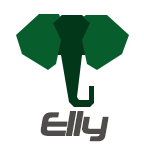
<style>
.page{position:relative;width:144px;height:144px;background:#ffffff}
.page>*{position:absolute;margin:0}
.t1{font:57px "NeuropoliticalRg-Regular";letter-spacing:-0.075em;color:#504c4c;font-weight:bold;font-style:italic}
</style>
<div class="page">
<p class="t1" style="left:40px;top:111px;width:69px;height:31px">Elly</p>
</div>
